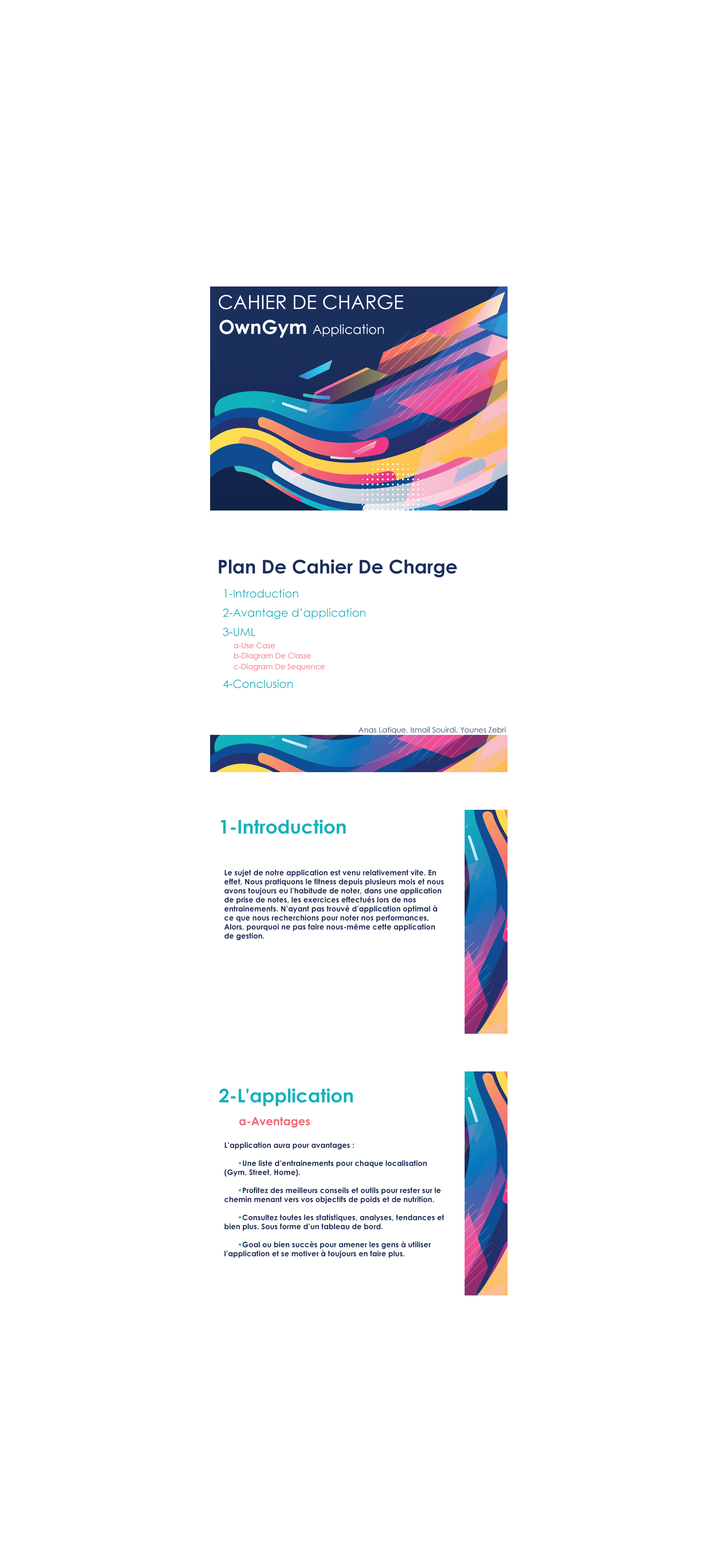
<style>
.page{position:relative;width:718px;height:1568px;background:#ffffff}
.page>*{position:absolute;margin:0}
.t1{font:19.2px "CenturyGothic";color:#ffffff;text-transform:uppercase}
.t2{font:12.8px "CenturyGothic";color:#ffffff}
.t3{font:19.2px "CenturyGothic-Bold";color:#ffffff}
.t4{font:18.8px "CenturyGothic-Bold";color:#1b2f5d}
.t5{font:11.3px "CenturyGothic";color:#11b2bc}
.t6{font:7.5px "CenturyGothic";color:#f16674}
.t7{font:7.5px "CenturyGothic";color:#2c3e67}
.t8{font:18.8px "CenturyGothic-Bold";color:#11b2bc}
.t9{font:7.5px "CenturyGothic-Bold";color:#182b56}
.t10{font:11.3px "CenturyGothic-Bold";color:#f16674}
.t11{font:7.5px "CenturyGothic-Bold";color:#11b2bc}
</style>
<div class="page">
<p class="t1" style="left:219px;top:295px;width:184px;height:14px">Cahier De Charge</p>
<p class="t2" style="left:219px;top:320px;width:165px;height:18px"><span class="t3">OwnGym </span>Application</p>
<p class="t4" style="left:219px;top:559px;width:238px;height:19px">Plan De Cahier De Charge</p>
<p class="t5" style="left:224px;top:589px;width:74px;height:9px">1-Introduction</p>
<p class="t5" style="left:223px;top:608px;width:143px;height:11px">2-Avantage d’application</p>
<p class="t5" style="left:223px;top:628px;width:33px;height:8px">3-UML</p>
<p class="t6" style="left:234px;top:643px;width:41px;height:5px">a-Use Case</p>
<p class="t6" style="left:234px;top:652px;width:77px;height:8px">b-Diagram De Classe</p>
<p class="t6" style="left:234px;top:663px;width:91px;height:8px">c-Diagram De Sequence</p>
<p class="t5" style="left:223px;top:680px;width:70px;height:8px">4-Conclusion</p>
<p class="t7" style="left:358px;top:727px;width:148px;height:7px">Anas Latique, Ismail Souirdi, Younes Zebri</p>
<p class="t8" style="left:220px;top:820px;width:126px;height:14px">1-Introduction</p>
<p class="t9" style="left:224px;top:870px;width:220px;height:70px;text-align:right">Le sujet de notre application est venu relativement vite. En effet, Nous pratiquons le fitness depuis plusieurs mois et nous avons toujours eu l’habitude de noter, dans une application de prise de notes, les exercices effectués lors de nos entrainements. N’ayant pas trouvé d’application optimal à ce que nous recherchions pour noter nos performances, Alors, pourquoi ne pas faire nous-même cette application de gestion.</p>
<p class="t8" style="left:219px;top:1088px;width:134px;height:18px">2-L'application</p>
<p class="t10" style="left:239px;top:1117px;width:71px;height:11px">a-Aventages</p>
<p class="t9" style="left:224px;top:1142px;width:220px;height:116px;text-align:right">L’application aura pour avantages :<br><br> <span class="t11">•</span>Une liste d’entrainements pour chaque localisation (Gym, Street, Home).<br><br> <span class="t11">•</span>Profitez des meilleurs conseils et outils pour rester sur le chemin menant vers vos objectifs de poids et de nutrition.<br><br> <span class="t11">•</span>Consultez toutes les statistiques, analyses, tendances et bien plus. Sous forme d’un tableau de bord.<br><br> <span class="t11">•</span>Goal ou bien succès pour amener les gens à utiliser l’application et se motiver à toujours en faire plus.</p>
</div>
